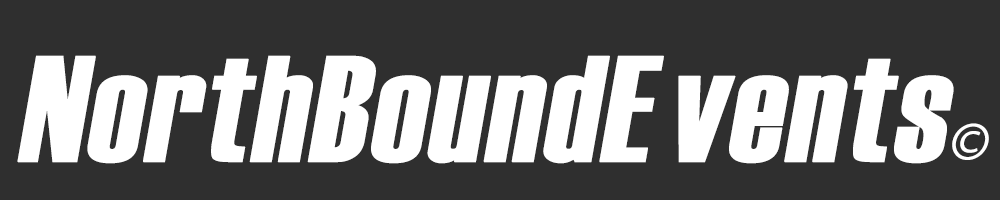
<style>
.page{position:relative;width:1000px;height:200px;background:#2f2f2f}
.page>*{position:absolute;margin:0}
.t1{font:150px "Haettenschweiler";color:#ffffff;font-weight:bold;font-style:italic}
.t2{font:58.3px "MyriadPro-Regular";color:#ffffff;font-weight:bold;font-style:italic}
</style>
<div class="page">
<p class="t1" style="left:17px;top:55px;width:972px;height:109px">NorthBoundE vents<span class="t2">©</span></p>
</div>
